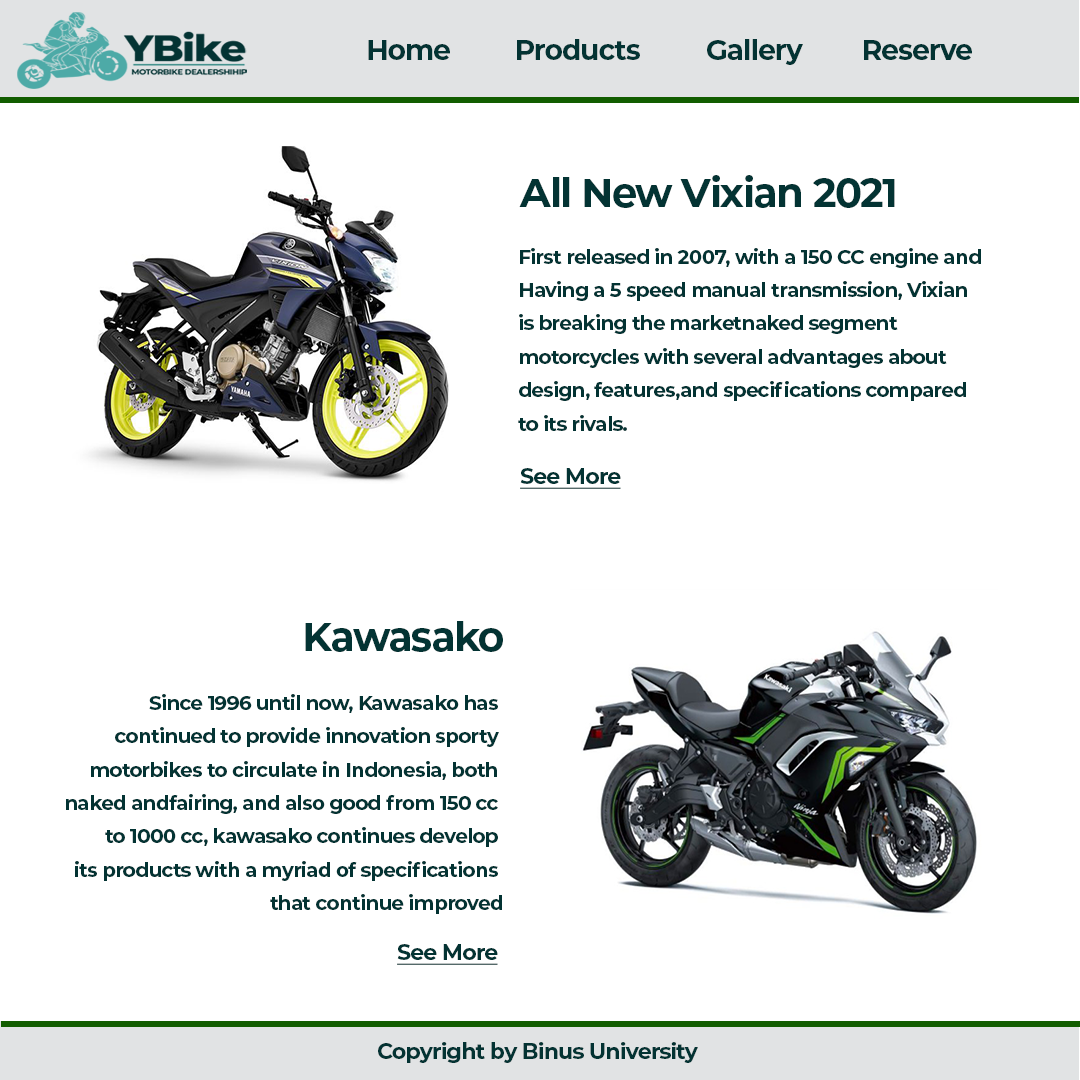
<style>
.page{position:relative;width:1080px;height:1080px;background:#ffffff}
.page>*{position:absolute;margin:0}
.t1{font:28px "Montserrat-Bold";letter-spacing:-0.035em;color:#033333}
.t2{font:40px "Montserrat-Bold";letter-spacing:-0.035em;color:#033333}
.t3{font:20px/33.4px "Montserrat-Bold";letter-spacing:-0.035em;color:#033333}
.t4{font:22px "Montserrat-Bold";letter-spacing:-0.035em;color:#033333;text-decoration:underline}
.t5{font:22px "Montserrat-Bold";letter-spacing:-0.035em;color:#033333}
</style>
<div class="page">
<p class="t1" style="left:368px;top:40px;width:82px;height:20px">Home</p>
<p class="t1" style="left:517px;top:39px;width:123px;height:21px">Products</p>
<p class="t1" style="left:707px;top:39px;width:96px;height:26px">Gallery</p>
<p class="t1" style="left:864px;top:40px;width:108px;height:20px">Reserve</p>
<p class="t2" style="left:519px;top:175px;width:376px;height:33px">All New Vixian 2021</p>
<p class="t3" style="left:518px;top:248px;width:463px;height:183px">First released in 2007, with a 150 CC engine and<br>Having a 5 speed manual transmission, Vixian <br>is breaking the marketnaked segment <br>motorcycles with several advantages about <br>design, features,and specifications compared <br>to its rivals.</p>
<p class="t4" style="left:520px;top:468px;width:101px;height:21px">See More</p>
<p class="t2" style="left:305px;top:621px;width:198px;height:31px">Kawasako</p>
<p class="t3" style="left:66px;top:694px;width:436px;height:220px;text-align:right">Since 1996 until now, Kawasako has <br>continued to provide innovation sporty <br>motorbikes to circulate in Indonesia, both <br>naked andfairing, and also good from 150 cc <br>to 1000 cc, kawasako continues develop <br>its products with a myriad of specifications <br>that continue improved</p>
<p class="t4" style="left:397px;top:944px;width:101px;height:21px">See More</p>
<p class="t5" style="left:378px;top:1042px;width:320px;height:21px">Copyright by Binus University</p>
</div>
